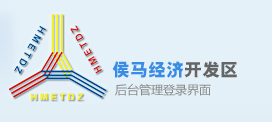
<style>
.page{position:relative;width:272px;height:122px;background:#e4f1f9}
.page>*{position:absolute;margin:0}
.t1{font:18px "HYb9gj";color:#3a8be3}
.t2{font:18px "HYb9gj";color:#656566}
.t3{font:12px "MicrosoftYaHei";color:#8b8b8b}
</style>
<div class="page">
<p class="t1" style="left:112px;top:61px;width:125px;height:17px">侯马经济<span class="t2">开发区</span></p>
<p class="t3" style="left:115px;top:83px;width:96px;height:13px">后台管理登录界面</p>
</div>
